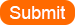
<style>
.page{position:relative;width:75px;height:25px;background:#ff6a00}
.page>*{position:absolute;margin:0}
.t1{font:18px "ArialMT";color:#ffffff}
</style>
<div class="page">
<p class="t1" style="left:10px;top:6px;width:56px;height:13px">Submit</p>
</div>
